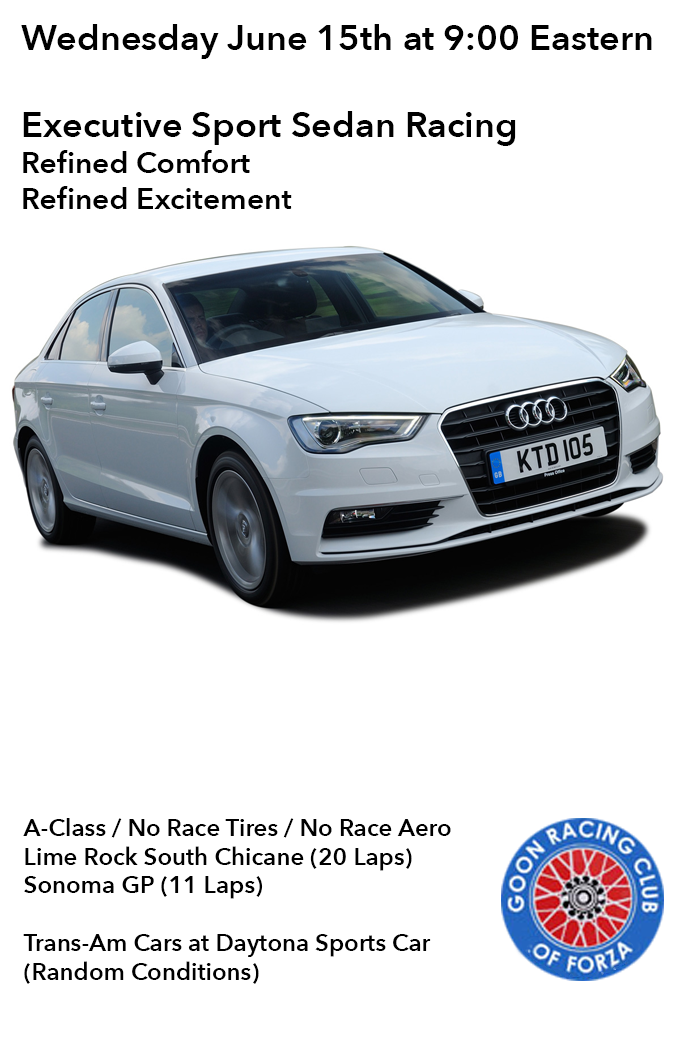
<style>
.page{position:relative;width:680px;height:1051px;background:#ffffff}
.page>*{position:absolute;margin:0}
.t1{font:36px "AvenirNext-DemiBold";color:#000000}
.t2{font:30px "AvenirNext-DemiBold";color:#000000}
.t3{font:24px "AvenirNext-DemiBold";color:#000000}
</style>
<div class="page">
<p class="t1" style="left:21px;top:24px;width:631px;height:185px">Wednesday June 15th at 9:00 Eastern<br><br>Executive Sport Sedan Racing<br><span class="t2">Refined Comfort<br>Refined Excitement</span></p>
<p class="t3" style="left:23px;top:818px;width:428px;height:166px">A-Class / No Race Tires / No Race Aero<br>Lime Rock South Chicane (20 Laps)<br>Sonoma GP (11 Laps)<br><br>Trans-Am Cars at Daytona Sports Car<br>(Random Conditions)</p>
</div>
